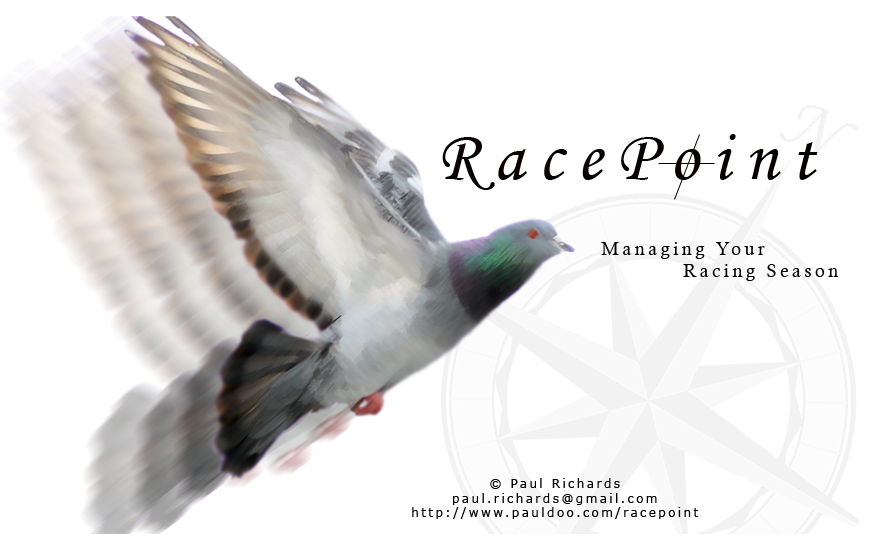
<style>
.page{position:relative;width:883px;height:550px;background:#ffffff}
.page>*{position:absolute;margin:0}
.t1{font:18px "CalistoMT";letter-spacing:0.2em;color:#040200}
.t2{font:12px "Verdana";letter-spacing:0.2em;color:#040200}
</style>
<div class="page">
<p class="t1" style="left:601px;top:242px;width:238px;height:39px;text-align:center">Managing Your <br>                  Racing Season</p>
<p class="t2" style="left:412px;top:478px;width:287px;height:41px;text-align:center">© Paul Richards<br>paul.richards@gmail.com<br>http://www.pauldoo.com/racepoint</p>
</div>
